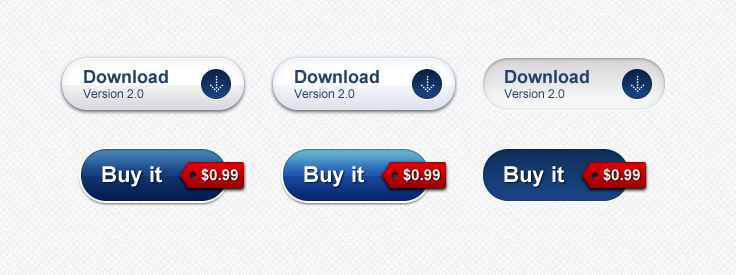
<style>
.page{position:relative;width:736px;height:275px}
.page>*{position:absolute;margin:0}
.t1{font:18px "Arial-BoldMT";color:#244069}
.t2{font:12px "ArialMT";color:#244069}
.t3{font:22px "Arial-BoldMT";color:#ffffff}
.t4{font:15px "Arial-BoldMT";color:#ffffff}
</style>
<div class="page">
<p class="t1" style="left:84px;top:70px;width:84px;height:14px">Download</p>
<p class="t1" style="left:295px;top:70px;width:84px;height:14px">Download</p>
<p class="t1" style="left:505px;top:70px;width:84px;height:14px">Download</p>
<p class="t2" style="left:83px;top:89px;width:61px;height:9px">Version 2.0</p>
<p class="t2" style="left:294px;top:89px;width:61px;height:9px">Version 2.0</p>
<p class="t2" style="left:504px;top:89px;width:61px;height:9px">Version 2.0</p>
<p class="t3" style="left:102px;top:166px;width:60px;height:21px">Buy it</p>
<p class="t4" style="left:201px;top:168px;width:37px;height:14px">$0.99</p>
<p class="t3" style="left:304px;top:166px;width:60px;height:21px">Buy it</p>
<p class="t4" style="left:403px;top:168px;width:37px;height:14px">$0.99</p>
<p class="t3" style="left:504px;top:166px;width:60px;height:21px">Buy it</p>
<p class="t4" style="left:603px;top:168px;width:37px;height:14px">$0.99</p>
</div>
